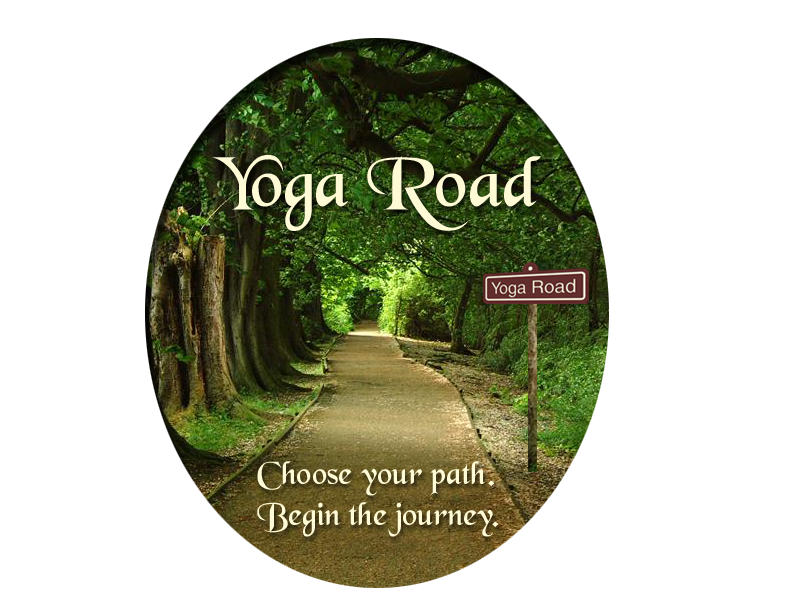
<style>
.page{position:relative;width:800px;height:600px;background:#ffffff}
.page>*{position:absolute;margin:0}
.t1{font:74.7px "Antler";color:#fffad6}
.t2{font:34.1px "Antler";color:#fffad6}
</style>
<div class="page">
<p class="t1" style="left:212px;top:155px;width:329px;height:76px">Yoga Road</p>
<p class="t2" style="left:257px;top:461px;width:242px;height:76px">Choose your path.<br>Begin the journey.</p>
</div>
